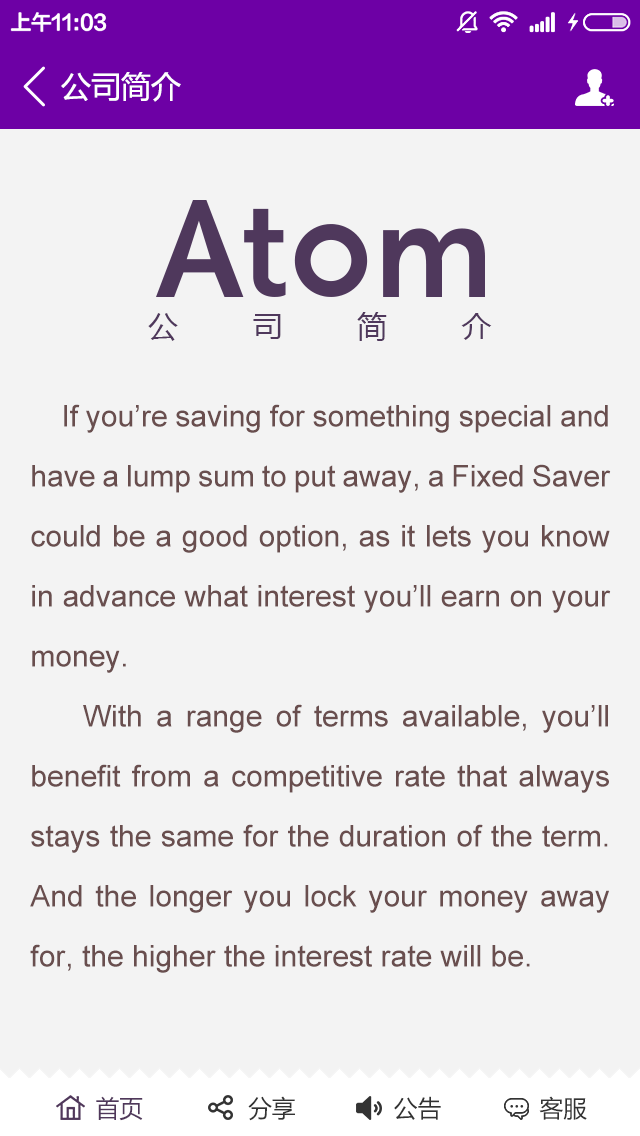
<style>
.page{position:relative;width:640px;height:1136px;background:#f3f3f3}
.page>*{position:absolute;margin:0}
.t1{font:30px "MicrosoftYaHei";color:#ffffff}
.t2{font:30px "MicrosoftYaHei";letter-spacing:0.26em;color:#4f385c}
.t3{font:30px/60px "ArialMT";color:#694e4e}
.t4{font:24px "MicrosoftYaHei";color:#333333}
.t5{font:24px "MicrosoftYaHei";color:#50385b}
</style>
<div class="page">
<p class="t1" style="left:61px;top:72px;width:120px;height:30px">公司简介</p>
<p class="t2" style="left:148px;top:312px;width:344px;height:29px">公    司    简    介</p>
<p class="t3" style="left:30px;top:404px;width:581px;height:569px;text-align:justify">If you’re saving for something special and have a lump sum to put away, a Fixed Saver could be a good option, as it lets you know in advance what interest you’ll earn on your money.<br>    With a range of terms available, you’ll benefit from a competitive rate that always stays the same for the duration of the term. And the longer you lock your money away for, the higher the interest rate will be.</p>
<p class="t4" style="left:96px;top:1096px;width:491px;height:25px"><span class="t5">首页</span>               分享              公告              客服</p>
</div>
